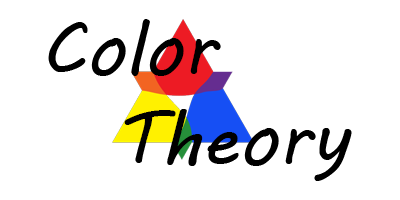
<style>
.page{position:relative;width:400px;height:200px;background:#ffffff}
.page>*{position:absolute;margin:0}
.t1{font:75px "MVBoli";color:#000000}
</style>
<div class="page">
<p class="t1" style="left:48px;top:19px;width:304px;height:162px">Color<br>  Theory</p>
</div>
